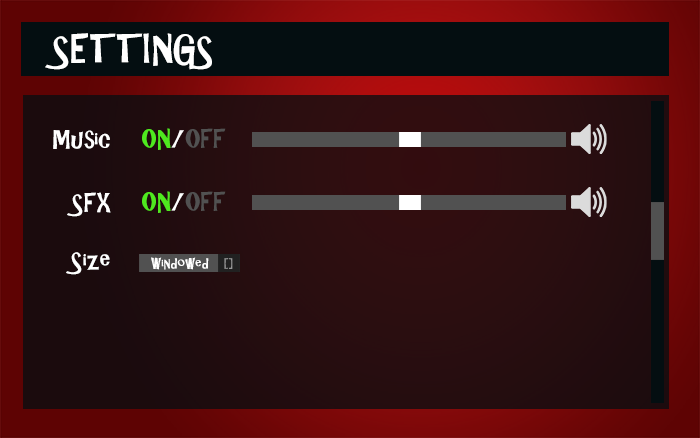
<style>
.page{position:relative;width:700px;height:438px}
.page>*{position:absolute;margin:0}
.t1{font:36px "ARCHRISTY";color:#ffffff}
.t2{font:24px "ARCHRISTY";color:#ffffff}
.t3{font:24px "ARCHRISTY";color:#515151}
.t4{font:24px "ARCHRISTY";color:#4fe91f}
.t5{font:14px "ARCHRISTY";color:#ffffff}
.t6{font:14px "ARCHRISTY";color:#979797}
</style>
<div class="page">
<p class="t1" style="left:45px;top:33px;width:167px;height:37px">SETTINGS</p>
<p class="t2" style="left:53px;top:130px;width:57px;height:19px">Music</p>
<p class="t3" style="left:142px;top:128px;width:84px;height:22px"><span class="t4">ON</span><span class="t2">/</span>OFF</p>
<p class="t2" style="left:67px;top:192px;width:44px;height:25px">SFX</p>
<p class="t3" style="left:142px;top:191px;width:84px;height:22px"><span class="t4">ON</span><span class="t2">/</span>OFF</p>
<p class="t2" style="left:66px;top:252px;width:44px;height:23px">Size</p>
<p class="t5" style="left:151px;top:257px;width:58px;height:13px">Windowed</p>
<p class="t6" style="left:224px;top:258px;width:9px;height:11px">[]</p>
</div>
